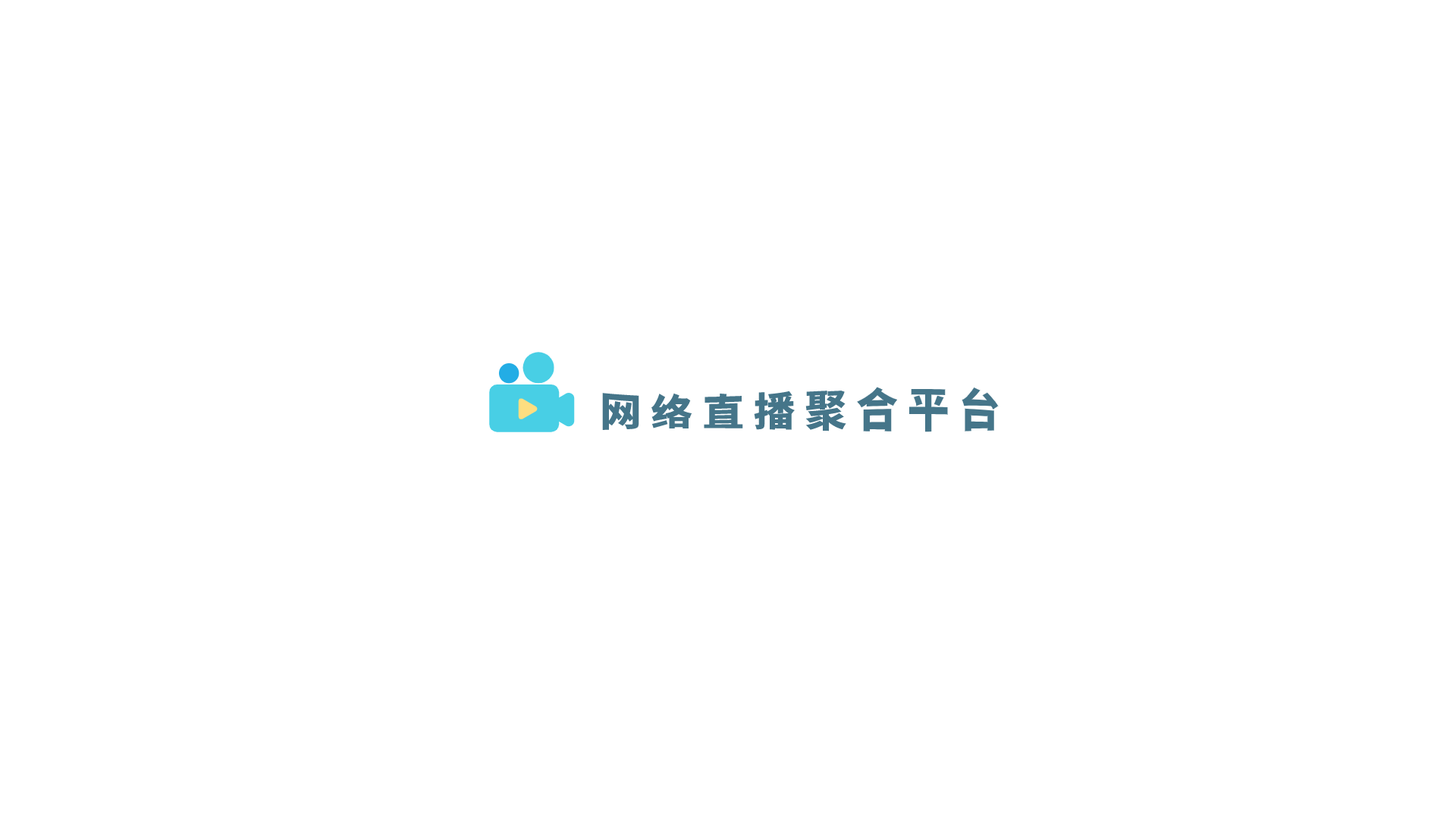
<style>
.page{position:relative;width:1456px;height:819px;background:#ffffff}
.page>*{position:absolute;margin:0}
.t1{font:41.7px "SourceHanSansSC-Heavy";color:#457589}
</style>
<div class="page">
<p class="t1" style="left:602px;top:387px;width:397px;height:45px">网 络 直 播 聚 合 平 台</p>
</div>
